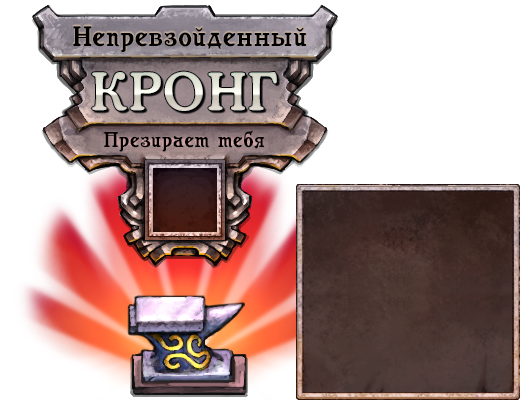
<style>
.page{position:relative;width:520px;height:400px;background:#ffffff}
.page>*{position:absolute;margin:0}
.t1{font:28px "Casanova";letter-spacing:0.04em;color:#000000}
.t2{font:51.5px "CooperMediumCBT";letter-spacing:0.04em;text-transform:uppercase}
.t3{font:21.2px "Casanova";letter-spacing:0.04em;color:#000000}
</style>
<div class="page">
<p class="t1" style="left:73px;top:26px;width:234px;height:26px">Непревзойденный</p>
<p class="t2" style="left:92px;top:71px;width:185px;height:40px">кронг</p>
<p class="t3" style="left:104px;top:130px;width:161px;height:22px">Презирает тебя</p>
</div>
